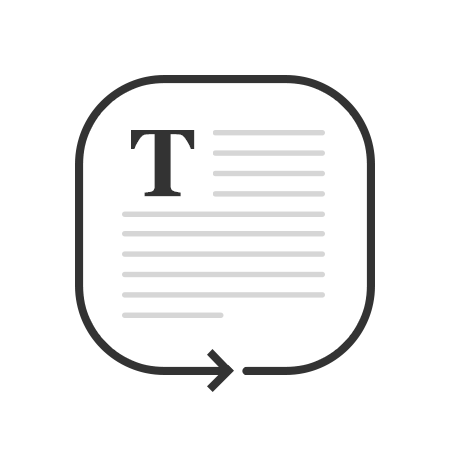
<style>
.page{position:relative;width:450px;height:450px;background:#ffffff}
.page>*{position:absolute;margin:0}
.t1{font:95.5px "Georgia-Bold";color:#333333}
</style>
<div class="page">
<p class="t1" style="left:131px;top:130px;width:64px;height:67px">T</p>
</div>
